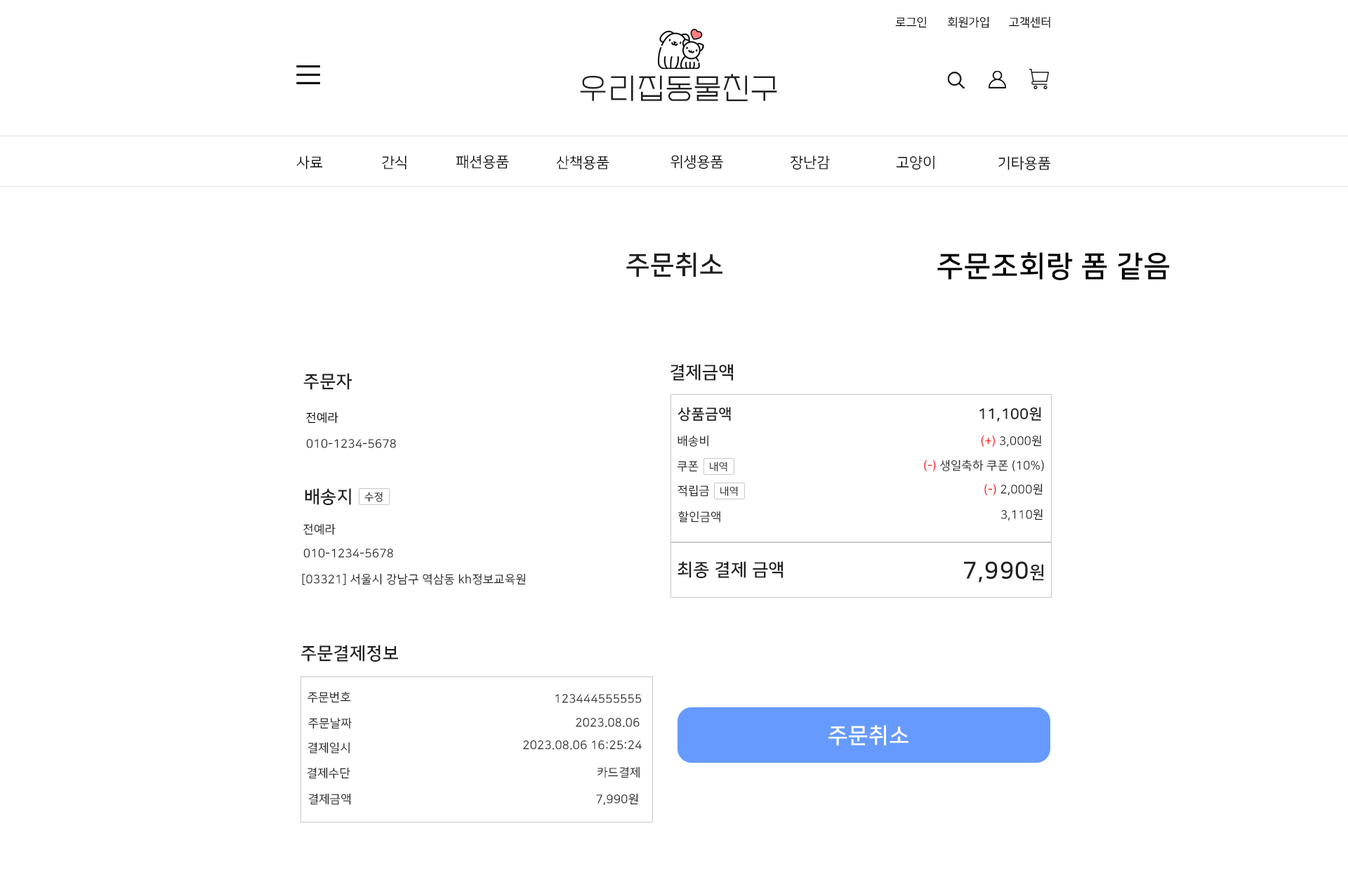
<style>
.page{position:relative;width:1348px;height:885px;background:#ffffff}
.page>*{position:absolute;margin:0}
.t1{font:11.7px "NanumSquareR";color:#000000}
.t2{font:29.3px "EF_watermelonSalad";letter-spacing:0.025em;color:#202020}
.t3{font:14.6px "NanumSquareR";color:#000000}
.t4{font:26.3px "NanumSquareB";letter-spacing:0.025em;color:#202020}
.t5{font:29.3px "NanumSquareB";letter-spacing:0.025em;color:#000000}
.t6{font:17.6px "NanumSquareB";letter-spacing:0.025em;color:#202020}
.t7{font:11.7px "NanumSquareR";letter-spacing:0.025em;color:#000000}
.t8{font:14.6px "NanumSquareB";letter-spacing:0.025em;color:#202020}
.t9{font:11.7px "NanumSquareR";letter-spacing:0.025em;color:#202020}
.t10{font:11.7px "NanumSquareR";letter-spacing:0.025em;color:#ff0000}
.t11{font:10.2px "NanumSquareR";letter-spacing:0.025em;color:#202020}
.t12{font:23.4px "NanumSquareB";letter-spacing:0.025em;color:#202020}
.t13{font:21.8px "NanumSquareB";letter-spacing:0.025em;color:#ffffff}
</style>
<div class="page">
<p class="t1" style="left:895px;top:16px;width:32px;height:12px">로그인</p>
<p class="t1" style="left:948px;top:16px;width:41px;height:12px">회원가입</p>
<p class="t1" style="left:1009px;top:16px;width:41px;height:12px">고객센터</p>
<p class="t2" style="left:580px;top:74px;width:197px;height:27px">우리집동물친구</p>
<p class="t3" style="left:296px;top:155px;width:27px;height:14px">사료</p>
<p class="t3" style="left:382px;top:155px;width:24px;height:15px">간식</p>
<p class="t3" style="left:456px;top:154px;width:53px;height:15px">패션용품</p>
<p class="t3" style="left:556px;top:155px;width:53px;height:15px">산책용품</p>
<p class="t3" style="left:670px;top:154px;width:53px;height:15px">위생용품</p>
<p class="t3" style="left:791px;top:155px;width:39px;height:15px">장난감</p>
<p class="t3" style="left:896px;top:155px;width:38px;height:15px">고양이</p>
<p class="t3" style="left:998px;top:156px;width:53px;height:15px">기타용품</p>
<p class="t4" style="left:626px;top:252px;width:96px;height:25px">주문취소</p>
<p class="t5" style="left:937px;top:252px;width:233px;height:28px">주문조회랑 폼 같음</p>
<p class="t6" style="left:670px;top:364px;width:63px;height:17px">결제금액</p>
<p class="t6" style="left:303px;top:373px;width:49px;height:17px">주문자</p>
<p class="t7" style="left:306px;top:411px;width:32px;height:12px">전예라</p>
<p class="t8" style="left:677px;top:406px;width:54px;height:15px">상품금액</p>
<p class="t8" style="left:979px;top:406px;width:62px;height:15px">11,100원</p>
<p class="t9" style="left:677px;top:435px;width:31px;height:12px">배송비</p>
<p class="t9" style="left:981px;top:435px;width:60px;height:12px"><span class="t10">(+)</span> 3,000원</p>
<p class="t9" style="left:306px;top:439px;width:90px;height:9px">010-1234-5678</p>
<p class="t9" style="left:677px;top:461px;width:22px;height:11px">쿠폰</p>
<p class="t11" style="left:710px;top:461px;width:17px;height:11px">내역</p>
<p class="t9" style="left:924px;top:459px;width:120px;height:12px">(-) 생일축하 쿠폰 (10%)</p>
<p class="t9" style="left:677px;top:484px;width:33px;height:12px">적립금</p>
<p class="t11" style="left:720px;top:486px;width:18px;height:10px">내역</p>
<p class="t9" style="left:984px;top:483px;width:59px;height:13px"><span class="t10">(-)</span> 2,000원</p>
<p class="t6" style="left:305px;top:488px;width:46px;height:17px">배송지</p>
<p class="t11" style="left:364px;top:491px;width:19px;height:11px">수정</p>
<p class="t9" style="left:1000px;top:508px;width:43px;height:13px">3,110원</p>
<p class="t9" style="left:678px;top:510px;width:42px;height:12px">할인금액</p>
<p class="t9" style="left:303px;top:523px;width:33px;height:12px">전예라</p>
<p class="t9" style="left:303px;top:548px;width:90px;height:9px">010-1234-5678</p>
<p class="t6" style="left:677px;top:561px;width:106px;height:18px">최종 결제 금액</p>
<p class="t12" style="left:964px;top:561px;width:80px;height:21px">7,990<span class="t6">원</span></p>
<p class="t9" style="left:302px;top:573px;width:224px;height:12px">[03321] 서울시 강남구 역삼동 kh정보교육원</p>
<p class="t6" style="left:300px;top:645px;width:98px;height:17px">주문결제정보</p>
<p class="t9" style="left:308px;top:691px;width:43px;height:12px">주문번호</p>
<p class="t9" style="left:555px;top:694px;width:87px;height:9px">123444555555</p>
<p class="t9" style="left:308px;top:717px;width:44px;height:12px">주문날짜</p>
<p class="t9" style="left:576px;top:718px;width:64px;height:9px">2023.08.06</p>
<p class="t13" style="left:828px;top:725px;width:80px;height:21px">주문취소</p>
<p class="t9" style="left:308px;top:741px;width:42px;height:12px">결제일시</p>
<p class="t9" style="left:523px;top:740px;width:119px;height:10px">2023.08.06 16:25:24</p>
<p class="t9" style="left:307px;top:767px;width:43px;height:12px">결제수단</p>
<p class="t9" style="left:597px;top:766px;width:43px;height:12px">카드결제</p>
<p class="t9" style="left:308px;top:793px;width:43px;height:12px">결제금액</p>
<p class="t9" style="left:596px;top:793px;width:42px;height:12px">7,990원</p>
</div>
